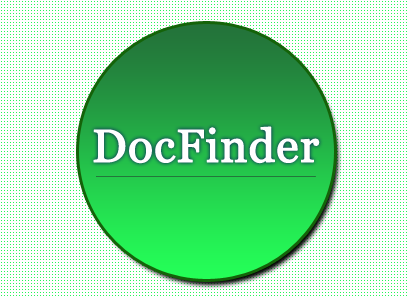
<style>
.page{position:relative;width:409px;height:297px;background:#ffffff}
.page>*{position:absolute;margin:0}
.t1{font:46.1px "Vani";color:#fffeff;font-weight:bold}
</style>
<div class="page">
<p class="t1" style="left:93px;top:126px;width:227px;height:38px">DocFinder</p>
</div>
